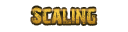
<style>
.page{position:relative;width:128px;height:32px;background:#ffffff}
.page>*{position:absolute;margin:0}
.t1{font:22px "28DaysLater";scale:0.91 1}
</style>
<div class="page">
<p class="t1" style="left:32px;top:7px;width:64px;height:17px">Scaling</p>
</div>
